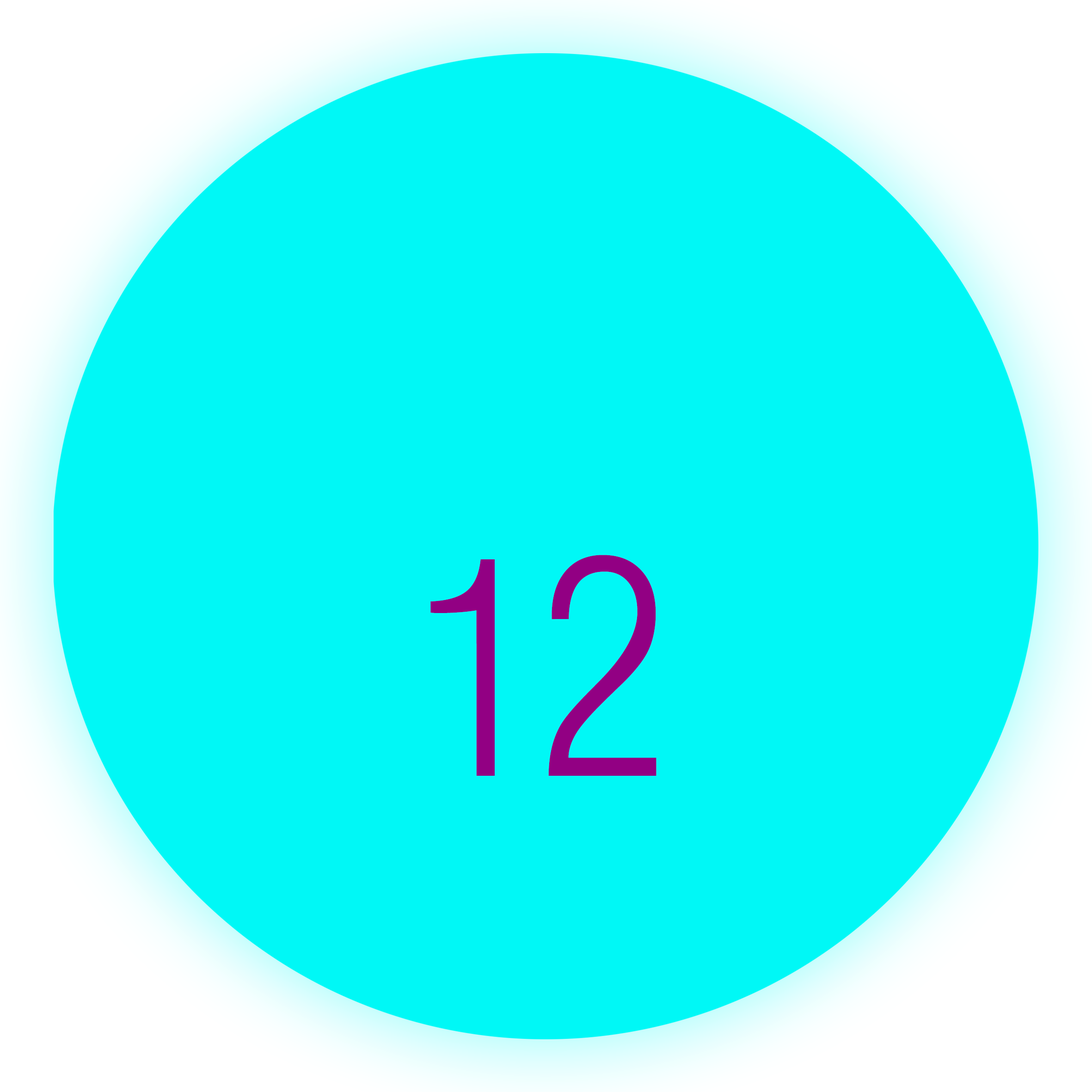
<style>
.page{position:relative;width:1092px;height:1092px;background:#00f8f6}
.page>*{position:absolute;margin:0}
.t1{font:295.1px "Swiss721BT-LightCondensed";letter-spacing:-0.05em;color:#920083}
</style>
<div class="page">
<p class="t1" style="left:430px;top:555px;width:226px;height:221px">12</p>
</div>
